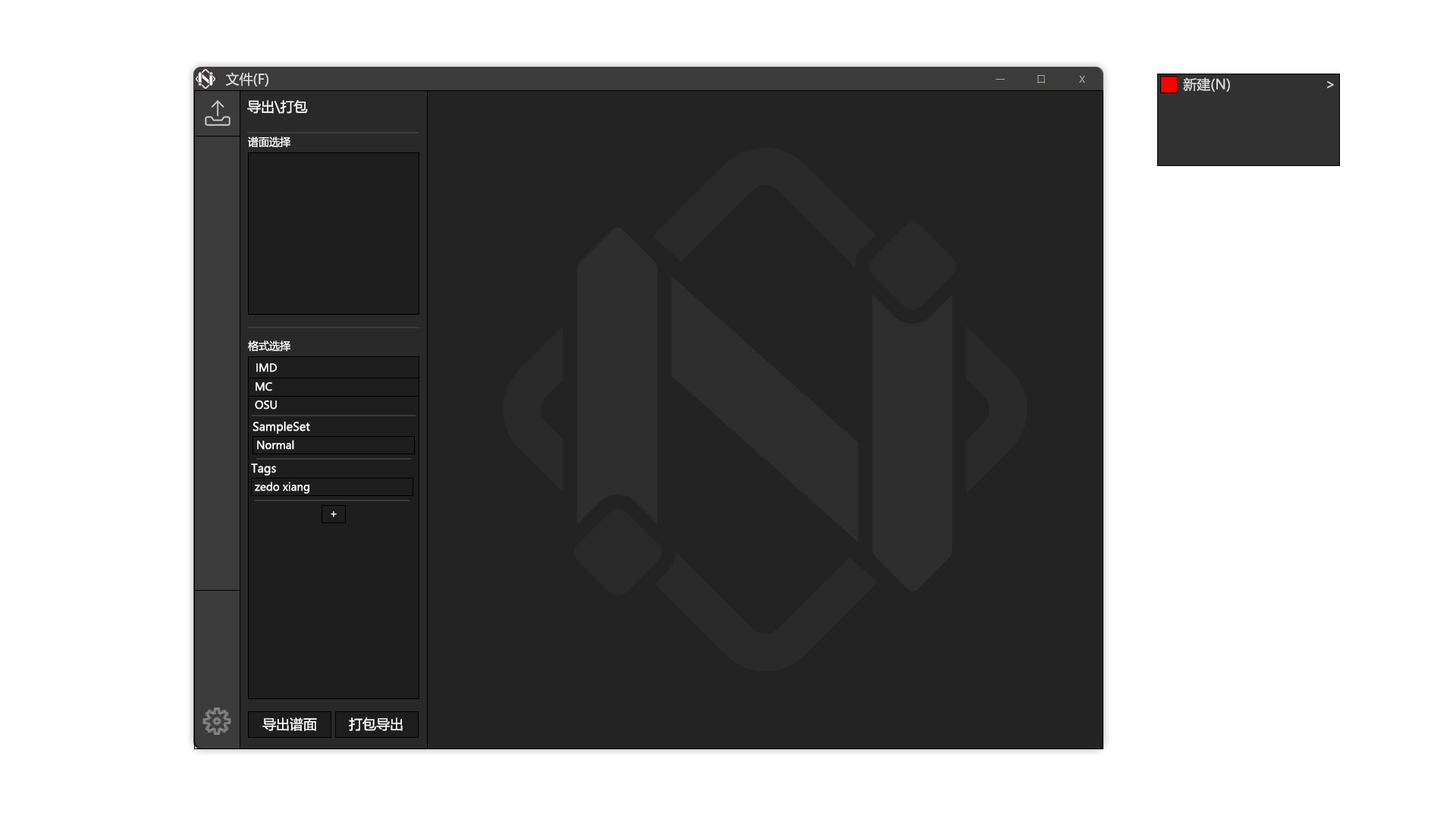
<style>
.page{position:relative;width:1456px;height:819px;background:#ffffff}
.page>*{position:absolute;margin:0}
.t1{font:13.6px "MicrosoftYaHei";color:#dadada}
.t2{font:13.6px "MicrosoftYaHei";color:#ffffff}
.t3{font:10.6px "MicrosoftYaHei";color:#ffffff}
.t4{font:11.4px "MicrosoftYaHei";color:#ffffff}
</style>
<div class="page">
<p class="t1" style="left:225px;top:72px;width:43px;height:14px">文件(F)</p>
<p class="t1" style="left:1183px;top:77px;width:47px;height:15px">新建(N)</p>
<p class="t1" style="left:1327px;top:80px;width:7px;height:9px">&gt;</p>
<p class="t2" style="left:247px;top:100px;width:61px;height:14px">导出\打包</p>
<p class="t3" style="left:248px;top:136px;width:42px;height:11px">谱面选择</p>
<p class="t3" style="left:248px;top:340px;width:42px;height:11px">格式选择</p>
<p class="t3" style="left:256px;top:363px;width:21px;height:9px">IMD</p>
<p class="t3" style="left:256px;top:382px;width:16px;height:9px">MC</p>
<p class="t3" style="left:255px;top:400px;width:22px;height:9px">OSU</p>
<p class="t4" style="left:253px;top:422px;width:57px;height:12px">SampleSet</p>
<p class="t3" style="left:257px;top:440px;width:37px;height:10px">Normal</p>
<p class="t4" style="left:251px;top:463px;width:25px;height:12px">Tags</p>
<p class="t3" style="left:255px;top:482px;width:54px;height:12px">zedo xiang</p>
<p class="t3" style="left:331px;top:511px;width:6px;height:6px">+</p>
<p class="t2" style="left:262px;top:717px;width:55px;height:14px">导出谱面</p>
<p class="t2" style="left:349px;top:717px;width:54px;height:14px">打包导出</p>
</div>
